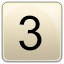
<style>
.page{position:relative;width:64px;height:64px}
.page>*{position:absolute;margin:0}
.t1{font:48px "ArialMT";color:#000000}
</style>
<div class="page">
<p class="t1" style="left:19px;top:15px;width:23px;height:36px">3</p>
</div>
